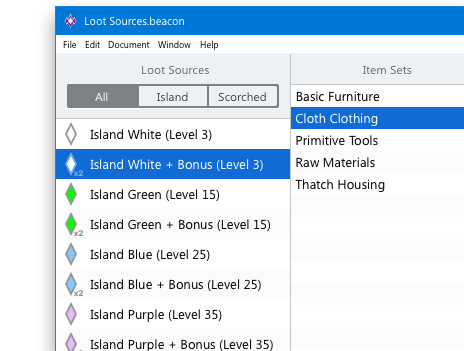
<style>
.page{position:relative;width:464px;height:351px;background:#ffffff}
.page>*{position:absolute;margin:0}
.t1{font:11px "SegoeUI"}
.t2{font:9px "SegoeUI"}
.t3{font:12px "SegoeUI";color:#64686b}
.t4{font:12px "SegoeUI";color:#ffffff}
.t5{font:12px "SegoeUI";color:#404040}
.t6{font:13px "SegoeUI";color:#000000}
.t7{font:13px "SegoeUI";color:#ffffff}
.t8{font:13px "SegoeUI";color:#fefefe}
</style>
<div class="page">
<p class="t1" style="left:85px;top:16px;width:99px;height:10px">Loot Sources.beacon</p>
<p class="t2" style="left:63px;top:40px;width:14px;height:8px">File</p>
<p class="t2" style="left:85px;top:40px;width:15px;height:8px">Edit</p>
<p class="t2" style="left:108px;top:41px;width:42px;height:8px">Document</p>
<p class="t2" style="left:158px;top:40px;width:33px;height:8px">Window</p>
<p class="t2" style="left:200px;top:40px;width:19px;height:11px">Help</p>
<p class="t3" style="left:142px;top:65px;width:67px;height:10px">Loot Sources</p>
<p class="t3" style="left:363px;top:65px;width:49px;height:10px">Item Sets</p>
<p class="t4" style="left:95px;top:92px;width:13px;height:9px">All</p>
<p class="t5" style="left:157px;top:92px;width:31px;height:10px">Island</p>
<p class="t5" style="left:218px;top:92px;width:48px;height:10px">Scorched</p>
<p class="t6" style="left:296px;top:91px;width:84px;height:11px">Basic Furniture</p>
<p class="t7" style="left:296px;top:113px;width:82px;height:13px">Cloth Clothing</p>
<p class="t6" style="left:90px;top:129px;width:122px;height:13px">Island White (Level 3)</p>
<p class="t6" style="left:296px;top:135px;width:82px;height:11px">Primitive Tools</p>
<p class="t8" style="left:90px;top:159px;width:173px;height:13px">Island White + Bonus (Level 3)</p>
<p class="t6" style="left:296px;top:157px;width:79px;height:11px">Raw Materials</p>
<p class="t6" style="left:295px;top:179px;width:90px;height:13px">Thatch Housing</p>
<p class="t6" style="left:90px;top:189px;width:129px;height:13px">Island Green (Level 15)</p>
<p class="t6" style="left:90px;top:219px;width:180px;height:13px">Island Green + Bonus (Level 15)</p>
<p class="t6" style="left:90px;top:249px;width:120px;height:13px">Island Blue (Level 25)</p>
<p class="t6" style="left:90px;top:279px;width:171px;height:13px">Island Blue + Bonus (Level 25)</p>
<p class="t6" style="left:90px;top:309px;width:132px;height:13px">Island Purple (Level 35)</p>
<p class="t6" style="left:90px;top:339px;width:183px;height:13px">Island Purple + Bonus (Level 35)</p>
</div>
